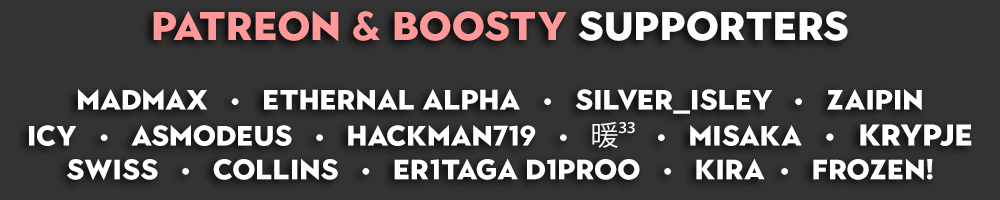
<style>
.page{position:relative;width:1000px;height:200px;background:#333333}
.page>*{position:absolute;margin:0}
.t1{font:28px "Town10Display-Black";color:#ffffff;text-transform:uppercase}
.t2{font:40px "Town10Display-Black";color:#ff9999;text-transform:uppercase}
.t3{font:40px "Town10Display-Black";color:#ffffff;text-transform:uppercase}
.t4{font:30px "Town10Display-Black";color:#ffffff;text-transform:uppercase}
.t5{font:28px "KozGoPr6N-Regular";color:#ffffff;text-transform:uppercase}
.t6{font:28px "MyriadPro-Regular";color:#ffffff;text-transform:uppercase}
</style>
<div class="page">
<p class="t1" style="left:29px;top:11px;width:943px;height:169px;text-align:center"><span class="t2">patreon &amp; boosty </span><span class="t3">supporters<br></span><span class="t4"><br></span>Madmax   •   Ethernal alpha   •   Silver_Isley   •   Zaipin<br>ICY   •   Asmodeus   •   hackman719   •   <span class="t5">暖</span><span class="t6">³³ </span>  •   misaka <span class="t4">  •   krypje<br></span>SwisS   •   Collins   •   er1taga d1proo   •   Kira  •   FrozeN!</p>
</div>
